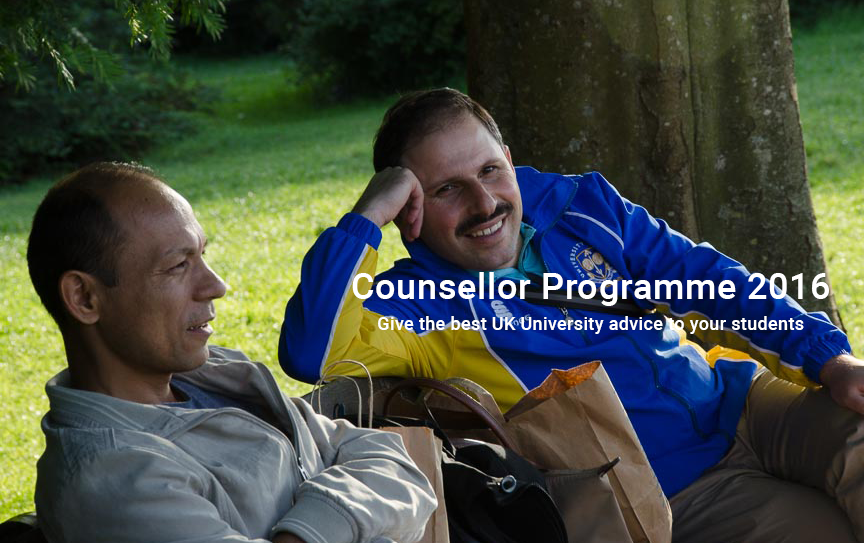
<style>
.page{position:relative;width:864px;height:543px}
.page>*{position:absolute;margin:0}
.t1{font:36px "Roboto-Medium";letter-spacing:0.02em;color:#ffffff}
.t2{font:18px "Roboto-Medium";letter-spacing:0.02em;color:#ffffff}
</style>
<div class="page">
<p class="t1" style="left:352px;top:272px;width:477px;height:34px">Counsellor Programme 2016</p>
<p class="t2" style="left:378px;top:316px;width:426px;height:18px">Give the best UK University advice to your students</p>
</div>
